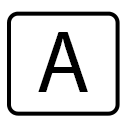
<style>
.page{position:relative;width:128px;height:128px;background:#ffffff}
.page>*{position:absolute;margin:0}
.t1{font:88.4px "MyriadPro-Regular";color:#000000}
</style>
<div class="page">
<p class="t1" style="left:38px;top:32px;width:50px;height:60px">A</p>
</div>
